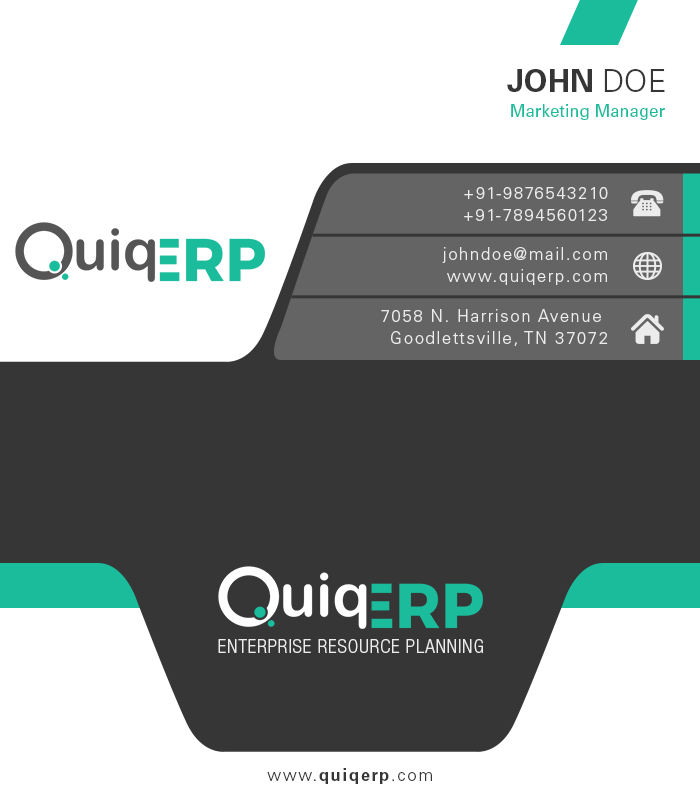
<style>
.page{position:relative;width:700px;height:800px;background:#ffffff}
.page>*{position:absolute;margin:0}
.t1{font:30.6px "UniversLTStd-Bold";color:#363636;text-transform:uppercase}
.t2{font:30.6px "UniversLTStd-Light";color:#363636;text-transform:uppercase}
.t3{font:16.7px "UniversLTStd";color:#1abc9c}
.t4{font:16.7px/22.2px "UniversLTStd-Light";letter-spacing:0.1em;color:#ececec}
.t5{font:19.4px "HelveticaNeueLTStd-LtCn";letter-spacing:0.04em;color:#ececec;text-transform:uppercase}
.t6{font:16.7px "UniversLTStd-Bold";letter-spacing:0.1em;color:#363636}
.t7{font:16.7px "UniversLTStd-Light";letter-spacing:0.1em;color:#363636}
</style>
<div class="page">
<p class="t1" style="left:507px;top:69px;width:158px;height:23px">John<span class="t2"> Doe</span></p>
<p class="t3" style="left:511px;top:104px;width:154px;height:16px">Marketing Manager</p>
<p class="t4" style="left:464px;top:187px;width:144px;height:34px;text-align:right">+91-9876543210<br>+91-7894560123</p>
<p class="t4" style="left:442px;top:247px;width:165px;height:38px;text-align:right">johndoe@mail.com<br>www.quiqerp.com</p>
<p class="t4" style="left:381px;top:309px;width:227px;height:37px;text-align:right">7058 N. Harrison Avenue <br>Goodlettsville, TN 37072</p>
<p class="t5" style="left:218px;top:639px;width:265px;height:14px">Enterprise Resource Planning</p>
<p class="t6" style="left:267px;top:768px;width:165px;height:16px"><span class="t7">www.</span>quiqerp<span class="t7">.com</span></p>
</div>
